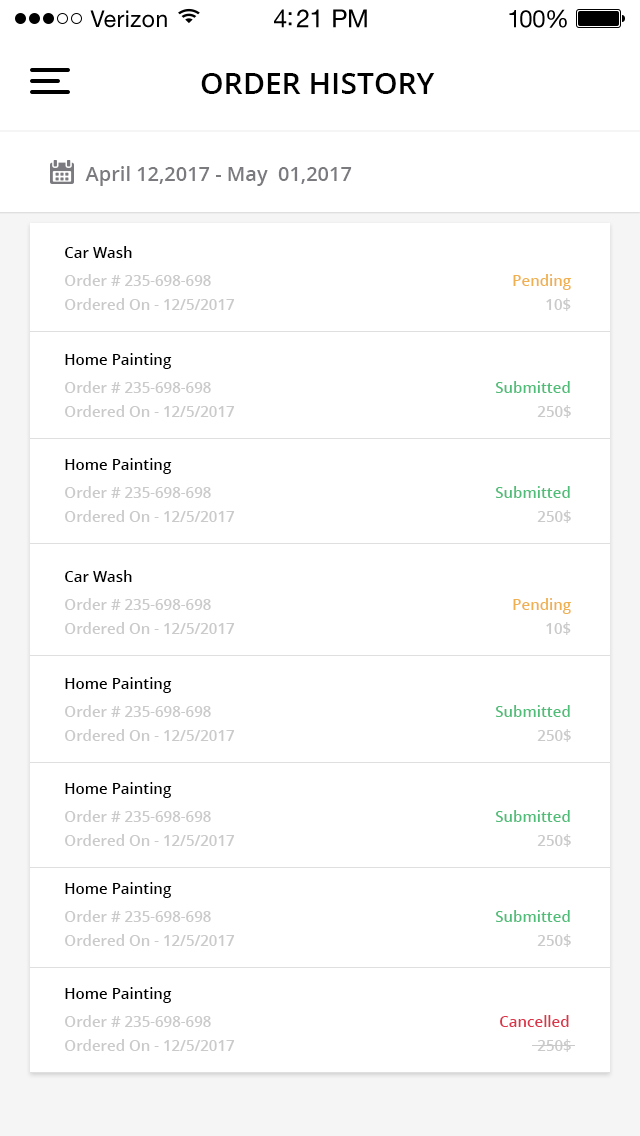
<style>
.page{position:relative;width:640px;height:1136px;background:#ffffff}
.page>*{position:absolute;margin:0}
.t1{font:23px "HelveticaNeueLTStd-Roman";letter-spacing:0.02em;color:#010000}
.t2{font:25px "HelveticaNeueLTStd-Roman";letter-spacing:-0.02em;color:#010000}
.t3{font:24px "HelveticaNeueLTStd-Roman";letter-spacing:-0.02em;color:#010000}
.t4{font:30px "OpenSans-Semibold";color:#010000}
.t5{font:20px "OpenSans-Semibold";color:#7a7a7f}
.t6{font:15px "OpenSans-Semibold";color:#000000}
.t7{font:15px "OpenSans-Semibold";color:#cacaca}
.t8{font:15px "OpenSans-Semibold";color:#f0b04f}
.t9{font:15px "OpenSans-Semibold";color:#4fbd78}
.t10{font:15px "OpenSans-Semibold";color:#db3549}
</style>
<div class="page">
<p class="t1" style="left:90px;top:10px;width:77px;height:18px">Verizon</p>
<p class="t2" style="left:274px;top:9px;width:93px;height:19px">4:21 PM</p>
<p class="t3" style="left:509px;top:9px;width:58px;height:19px">100%</p>
<p class="t4" style="left:201px;top:73px;width:234px;height:21px">ORDER HISTORY</p>
<p class="t5" style="left:85px;top:166px;width:267px;height:20px">April 12,2017 - May  01,2017</p>
<p class="t6" style="left:65px;top:246px;width:67px;height:12px">Car Wash</p>
<p class="t7" style="left:65px;top:274px;width:146px;height:12px">Order # 235-698-698</p>
<p class="t8" style="left:513px;top:274px;width:58px;height:16px">Pending</p>
<p class="t7" style="left:65px;top:298px;width:170px;height:12px">Ordered On - 12/5/2017</p>
<p class="t7" style="left:546px;top:298px;width:25px;height:13px">10$</p>
<p class="t6" style="left:65px;top:353px;width:107px;height:16px">Home Painting</p>
<p class="t7" style="left:65px;top:381px;width:146px;height:12px">Order # 235-698-698</p>
<p class="t9" style="left:496px;top:381px;width:74px;height:12px">Submitted</p>
<p class="t7" style="left:65px;top:405px;width:170px;height:12px">Ordered On - 12/5/2017</p>
<p class="t7" style="left:537px;top:405px;width:34px;height:13px">250$</p>
<p class="t6" style="left:65px;top:458px;width:107px;height:16px">Home Painting</p>
<p class="t7" style="left:65px;top:486px;width:146px;height:12px">Order # 235-698-698</p>
<p class="t9" style="left:496px;top:486px;width:74px;height:12px">Submitted</p>
<p class="t7" style="left:65px;top:510px;width:170px;height:12px">Ordered On - 12/5/2017</p>
<p class="t7" style="left:537px;top:510px;width:34px;height:13px">250$</p>
<p class="t6" style="left:65px;top:570px;width:67px;height:12px">Car Wash</p>
<p class="t7" style="left:65px;top:598px;width:146px;height:12px">Order # 235-698-698</p>
<p class="t8" style="left:513px;top:598px;width:58px;height:16px">Pending</p>
<p class="t7" style="left:65px;top:622px;width:170px;height:12px">Ordered On - 12/5/2017</p>
<p class="t7" style="left:546px;top:622px;width:25px;height:13px">10$</p>
<p class="t6" style="left:65px;top:677px;width:107px;height:16px">Home Painting</p>
<p class="t7" style="left:65px;top:705px;width:146px;height:12px">Order # 235-698-698</p>
<p class="t9" style="left:496px;top:705px;width:74px;height:12px">Submitted</p>
<p class="t7" style="left:65px;top:729px;width:170px;height:12px">Ordered On - 12/5/2017</p>
<p class="t7" style="left:537px;top:729px;width:34px;height:13px">250$</p>
<p class="t6" style="left:65px;top:782px;width:107px;height:16px">Home Painting</p>
<p class="t7" style="left:65px;top:810px;width:146px;height:12px">Order # 235-698-698</p>
<p class="t9" style="left:496px;top:810px;width:74px;height:12px">Submitted</p>
<p class="t7" style="left:65px;top:834px;width:170px;height:12px">Ordered On - 12/5/2017</p>
<p class="t7" style="left:537px;top:834px;width:34px;height:13px">250$</p>
<p class="t6" style="left:65px;top:882px;width:107px;height:16px">Home Painting</p>
<p class="t7" style="left:65px;top:910px;width:146px;height:12px">Order # 235-698-698</p>
<p class="t9" style="left:496px;top:910px;width:74px;height:12px">Submitted</p>
<p class="t7" style="left:65px;top:934px;width:170px;height:12px">Ordered On - 12/5/2017</p>
<p class="t7" style="left:537px;top:934px;width:34px;height:13px">250$</p>
<p class="t6" style="left:65px;top:987px;width:107px;height:16px">Home Painting</p>
<p class="t7" style="left:65px;top:1015px;width:146px;height:12px">Order # 235-698-698</p>
<p class="t10" style="left:500px;top:1015px;width:69px;height:12px">Cancelled</p>
<p class="t7" style="left:65px;top:1039px;width:170px;height:12px">Ordered On - 12/5/2017</p>
<p class="t7" style="left:537px;top:1039px;width:34px;height:13px">250$</p>
</div>
